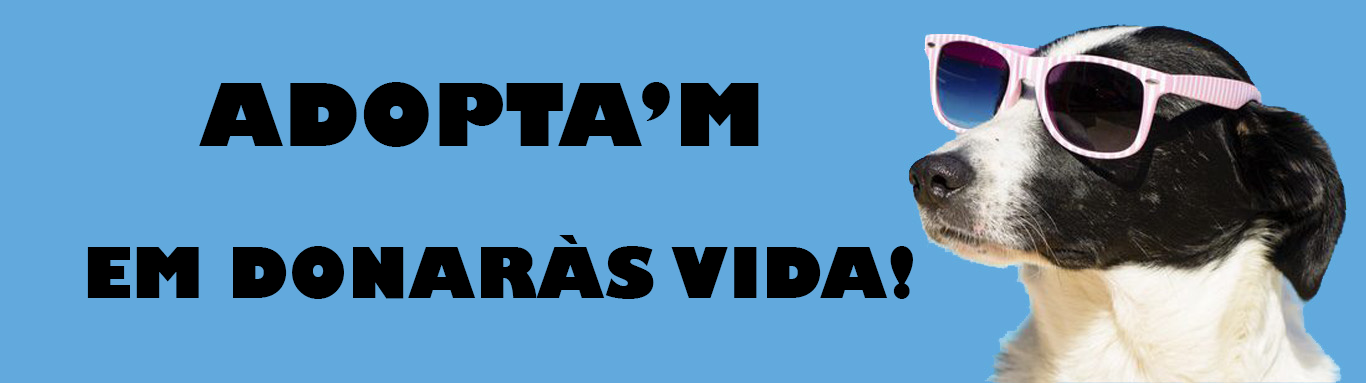
<style>
.page{position:relative;width:1366px;height:383px;background:#62a9dd}
.page>*{position:absolute;margin:0}
.t1{font:68px/5.8px "GillSans-UltraBold";letter-spacing:0.01em;color:#000000}
.t2{font:72px/5.8px "Calibri-Bold";letter-spacing:0.01em;color:#000000}
.t3{font:85px/5.8px "GillSans-UltraBold";letter-spacing:0.01em;color:#000000}
</style>
<div class="page">
<p class="t1" style="left:87px;top:82px;width:826px;height:217px;text-align:center"><span class="t2"><br><br><br><br><br><br><br> <br>            </span><span class="t3">ADOPTA’M<br></span><br><br><br><br><br><br><br><br><br>             <br>             <br><br><br><br>             EM DONARÀS VIDA!</p>
</div>
